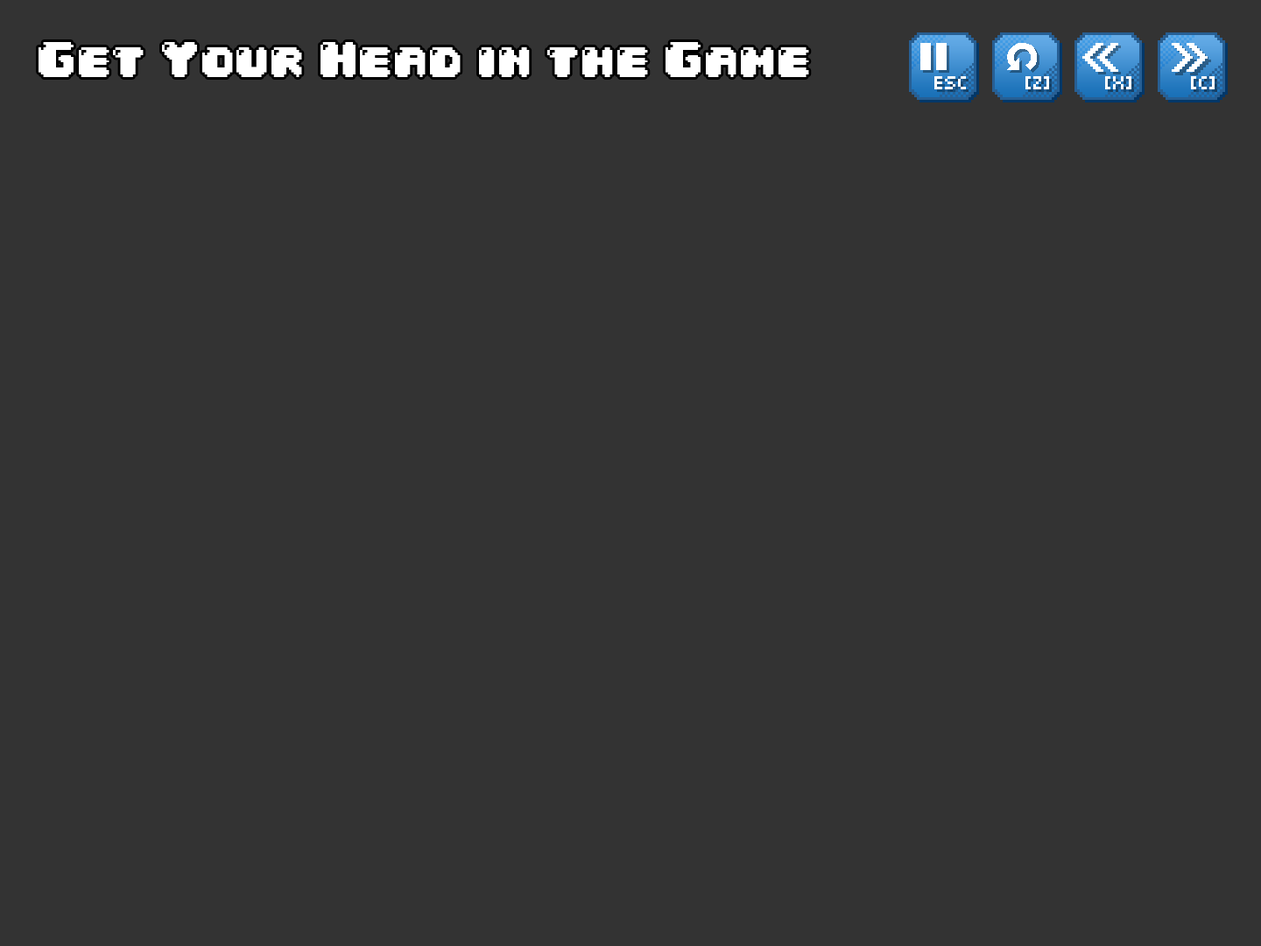
<style>
.page{position:relative;width:1261px;height:946px;background:#333333}
.page>*{position:absolute;margin:0}
.t1{font:42px "04b30";color:#ffffff}
.t2{font:21px "04b03";color:#ffffff}
</style>
<div class="page">
<p class="t1" style="left:39px;top:42px;width:770px;height:35px">Get Your Head in the Game</p>
<p class="t2" style="left:934px;top:76px;width:32px;height:13px">ESC</p>
<p class="t2" style="left:1025px;top:76px;width:24px;height:13px">[Z]</p>
<p class="t2" style="left:1105px;top:76px;width:26px;height:13px">[X]</p>
<p class="t2" style="left:1191px;top:76px;width:24px;height:13px">[C]</p>
</div>
